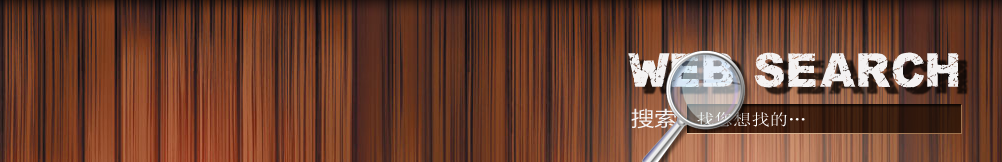
<style>
.page{position:relative;width:1002px;height:162px}
.page>*{position:absolute;margin:0}
.t1{font:44.2px "692-CAI978";color:#f4f2f2;text-transform:uppercase;font-weight:bold;scale:1.15 1}
.t2{font:20px "MicrosoftYaHei";color:#f4f2f2;scale:1.15 1}
.t3{font:16px "SimSun";color:#ffffff;scale:1.15 1}
</style>
<div class="page">
<p class="t1" style="left:628px;top:52px;width:331px;height:36px">Web search</p>
<p class="t2" style="left:631px;top:108px;width:46px;height:21px">搜索</p>
<p class="t3" style="left:697px;top:112px;width:108px;height:15px">找您想找的…</p>
</div>
